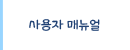
<style>
.page{position:relative;width:130px;height:50px;background:#ffffff}
.page>*{position:absolute;margin:0}
.t1{font:12.5px "THEAlien";color:#214274}
</style>
<div class="page">
<p class="t1" style="left:29px;top:19px;width:71px;height:12px">사용자 매뉴얼</p>
</div>
